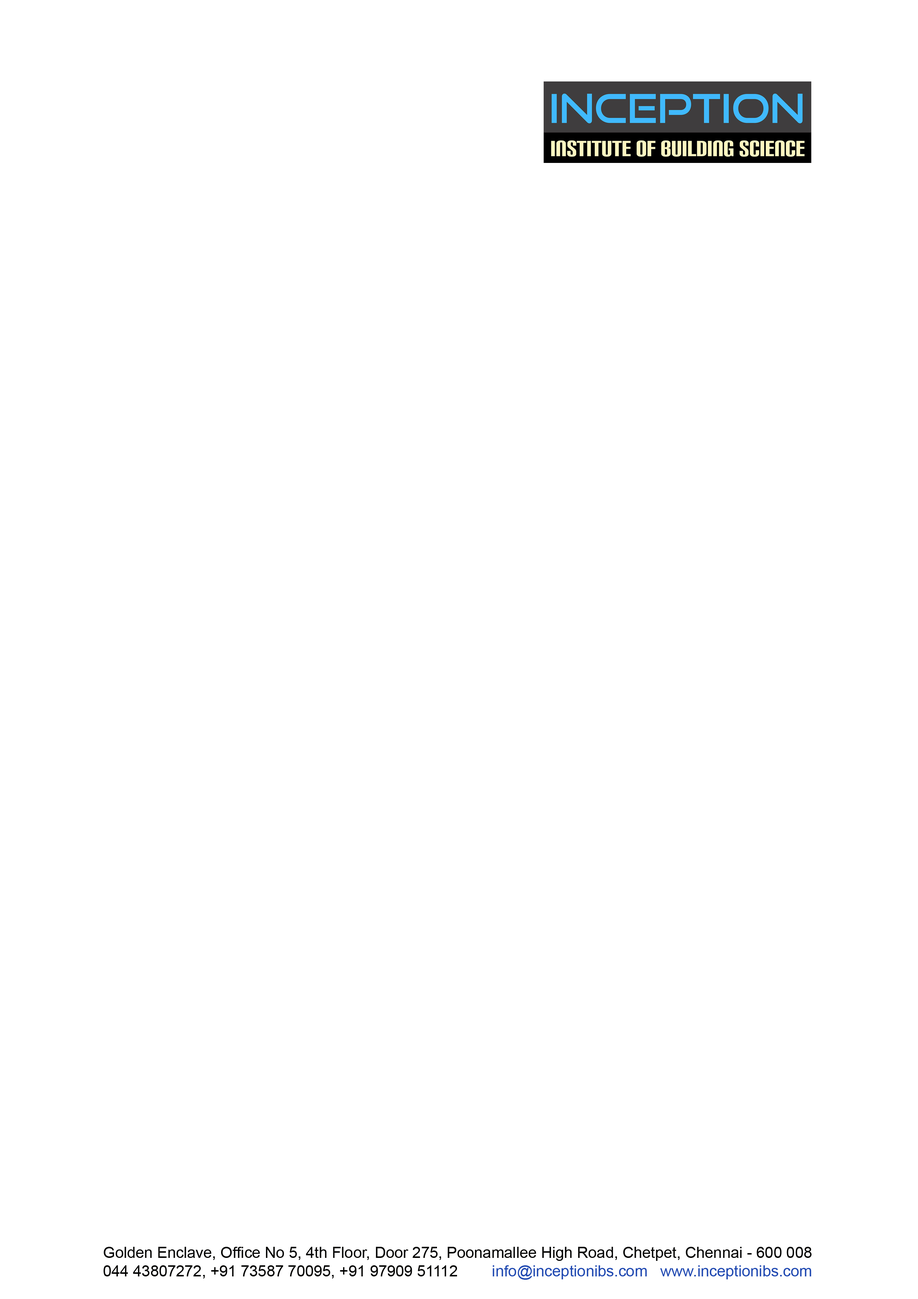
<style>
.page{position:relative;width:918px;height:1299px;background:#ffffff}
.page>*{position:absolute;margin:0}
.t1{font:15.4px "ArialMT";color:#010100}
.t2{font:15.4px "ArialMT";color:#1f48b1}
</style>
<div class="page">
<p class="t1" style="left:103px;top:1247px;width:709px;height:33px;text-align:center">Golden Enclave, Office No 5, 4th Floor, Door 275, Poonamallee High Road, Chetpet, Chennai - 600 008<br>044 43807272, +91 73587 70095, +91 97909 51112        <span class="t2">info@inceptionibs.com   www.inceptionibs.com</span></p>
</div>
